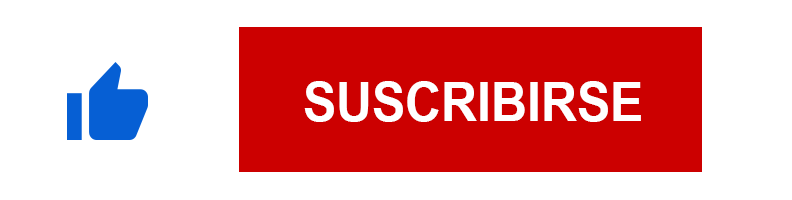
<style>
.page{position:relative;width:792px;height:200px;background:#ffffff}
.page>*{position:absolute;margin:0}
.t1{font:53.9px "ArialNarrow-Bold";color:#ffffff;scale:1.13 1}
</style>
<div class="page">
<p class="t1" style="left:304px;top:81px;width:337px;height:41px">SUSCRIBIRSE</p>
</div>
